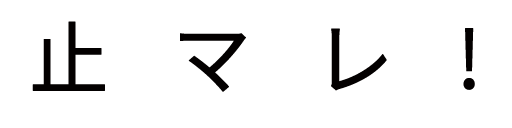
<style>
.page{position:relative;width:512px;height:128px;background:#ffffff}
.page>*{position:absolute;margin:0}
.t1{font:80px "NotoSansCJK-Regular";color:#030000;text-transform:uppercase;font-weight:bold}
</style>
<div class="page">
<p class="t1" style="left:32px;top:21px;width:443px;height:71px">止   マ   レ   !</p>
</div>
